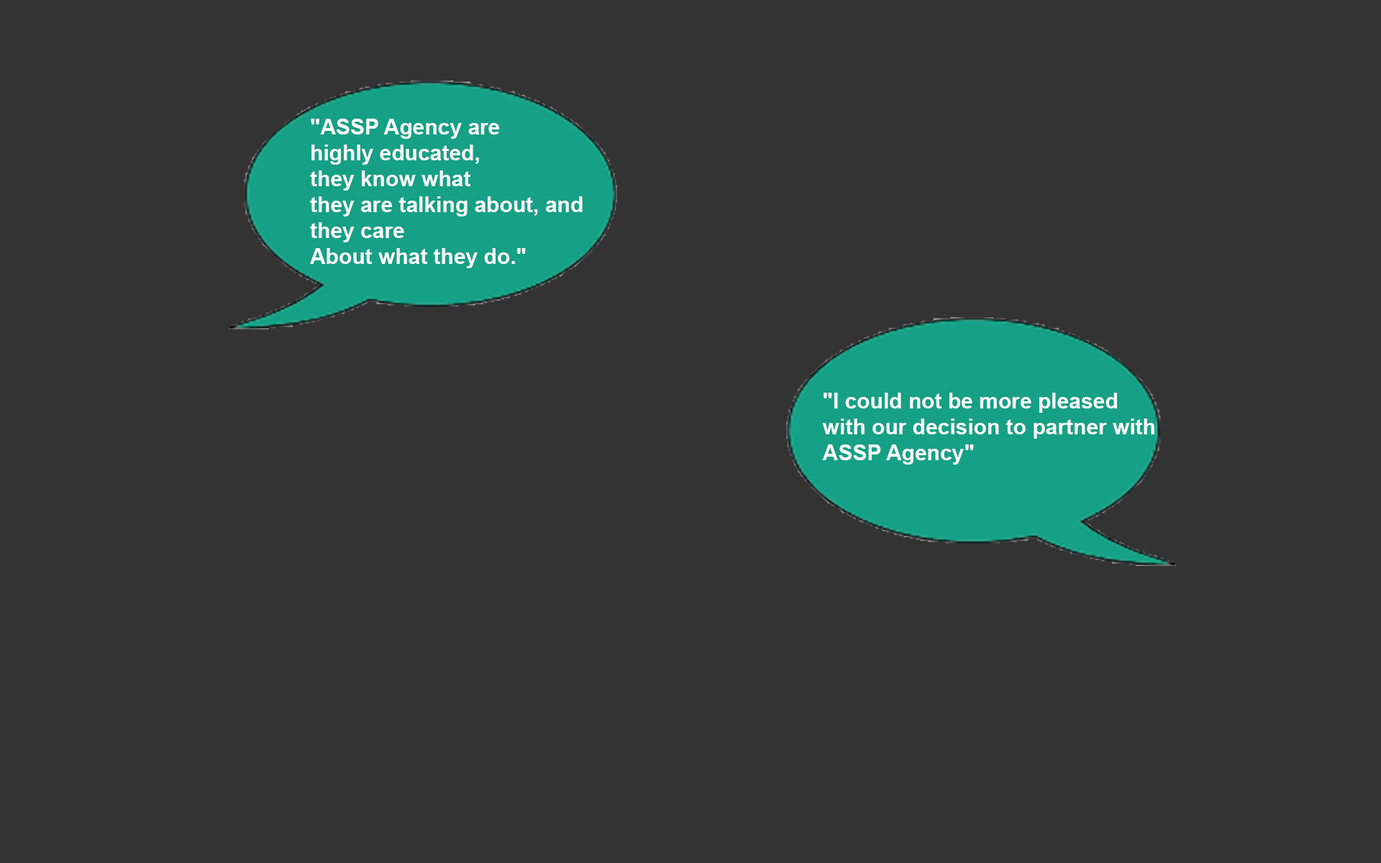
<style>
.page{position:relative;width:1381px;height:863px;background:#333333}
.page>*{position:absolute;margin:0}
.t1{font:21.6px "Arial-BoldMT";color:#fafcfc}
</style>
<div class="page">
<p class="t1" style="left:310px;top:119px;width:273px;height:149px">"ASSP Agency are <br>highly educated, <br>they know what <br>they are talking about, and <br>they care <br>About what they do."</p>
<p class="t1" style="left:822px;top:393px;width:333px;height:72px">"I could not be more pleased <br>with our decision to partner with <br>ASSP Agency"</p>
</div>
